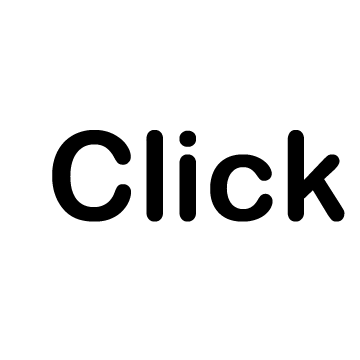
<style>
.page{position:relative;width:360px;height:360px;background:#ffffff}
.page>*{position:absolute;margin:0}
.t1{font:123.6px "ArialRoundedMTBold";color:#000000}
</style>
<div class="page">
<p class="t1" style="left:52px;top:130px;width:293px;height:92px">Click</p>
</div>
